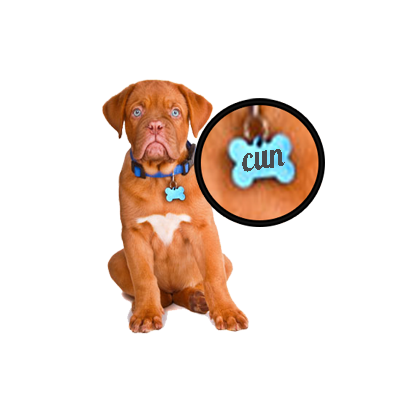
<style>
.page{position:relative;width:400px;height:400px;background:#ffffff}
.page>*{position:absolute;margin:0}
.t1{font:35.4px "Lobster1.4";color:#4a4b4d;scale:0.88 1}
</style>
<div class="page">
<p class="t1" style="left:242px;top:149px;width:43px;height:23px;rotate:-10deg">cun</p>
</div>
